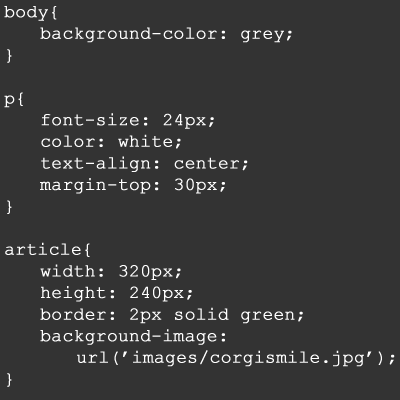
<style>
.page{position:relative;width:400px;height:400px;background:#333333}
.page>*{position:absolute;margin:0}
.t1{font:18px "CourierNewPSMT";letter-spacing:-0.01em;color:#ffffff;font-weight:bold}
</style>
<div class="page">
<p class="t1" style="left:4px;top:6px;width:391px;height:381px">body{<br> background-color: grey;<br>}<br><br>p{<br> font-size: 24px;<br> color: white;<br> text-align: center;<br> margin-top: 30px;<br>}<br><br>article{<br> width: 320px;<br> height: 240px;<br> border: 2px solid green;<br> background-image: <br>  url(’images/corgismile.jpg’);<br>}</p>
</div>
